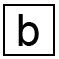
<style>
.page{position:relative;width:59px;height:59px;background:#ffffff}
.page>*{position:absolute;margin:0}
.t1{font:43.9px "ArialMT";color:#000000}
</style>
<div class="page">
<p class="t1" style="left:18px;top:14px;width:21px;height:32px">b</p>
</div>
